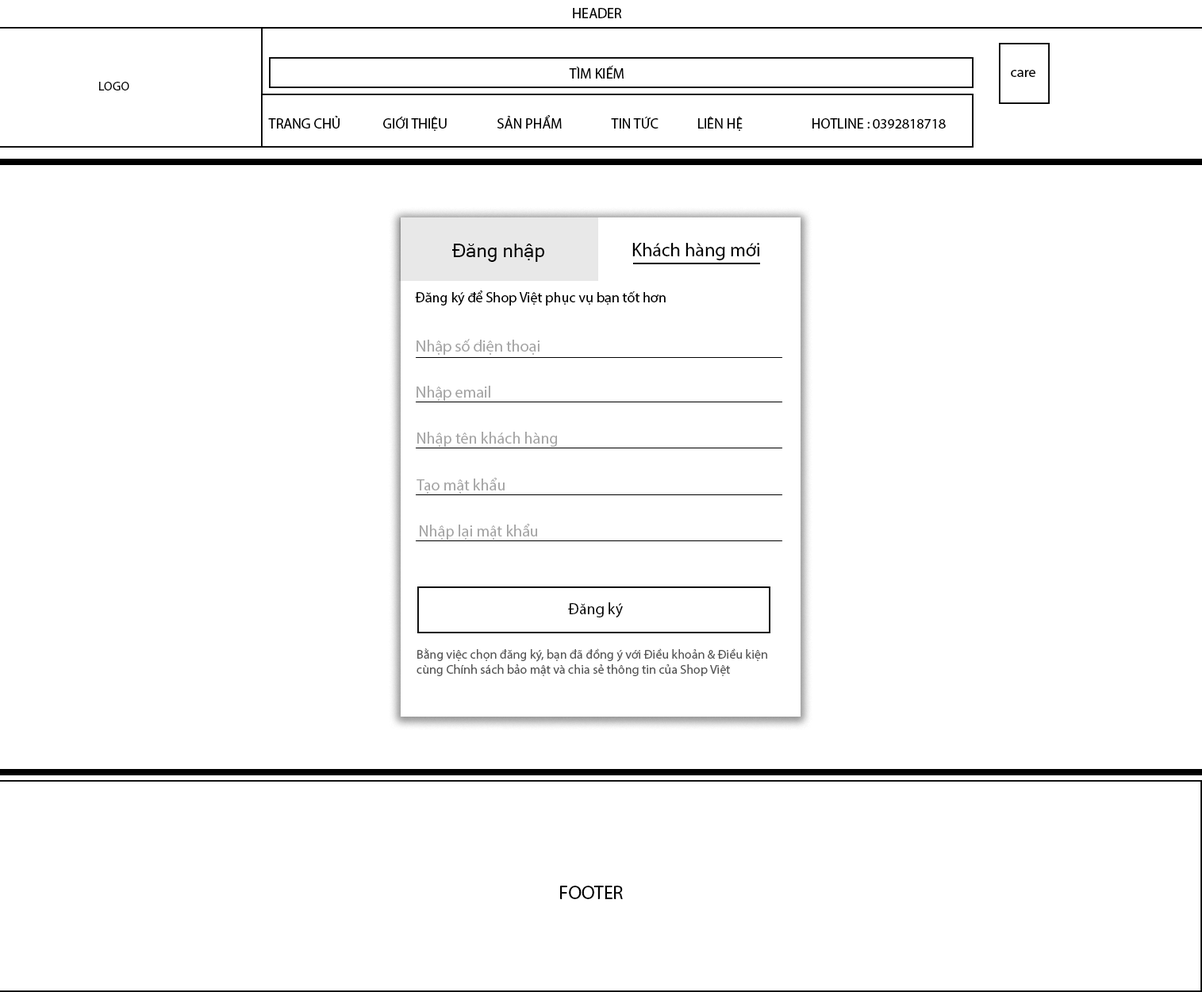
<style>
.page{position:relative;width:1202px;height:992px;background:#ffffff}
.page>*{position:absolute;margin:0}
.t1{font:14.3px "MyriadPro-Regular";color:#000000}
.t2{font:12.7px "MyriadPro-Regular";color:#000000}
.t3{font:19px "MicrosoftSansSerif";color:#000000}
.t4{font:19px "MyriadPro-Regular";color:#000000}
.t5{font:15.9px "MyriadPro-Regular";color:#a3a3a3}
.t6{font:15.9px "MyriadPro-Regular";color:#000000}
.t7{font:12.7px "MyriadPro-Regular";color:#555555}
.t8{font:19px "MyriadPro-Regular";color:#000000;text-transform:uppercase}
</style>
<div class="page">
<p class="t1" style="left:573px;top:8px;width:49px;height:10px">HEADER</p>
<p class="t1" style="left:569px;top:65px;width:55px;height:14px">TÌM KIẾM</p>
<p class="t1" style="left:1011px;top:70px;width:25px;height:7px">care</p>
<p class="t2" style="left:99px;top:82px;width:30px;height:8px">LOGO</p>
<p class="t1" style="left:268px;top:115px;width:678px;height:16px">TRANG CHỦ   GIỚI THIỆU  SẢN PHẨM   TIN TỨC  LIÊN HỆ   HOTLINE : 0392818718</p>
<p class="t3" style="left:452px;top:244px;width:92px;height:18px">Đăng nhập</p>
<p class="t4" style="left:632px;top:243px;width:127px;height:17px">Khách hàng mới</p>
<p class="t1" style="left:415px;top:290px;width:251px;height:16px">Đăng ký để Shop Việt phục vụ bạn tốt hơn</p>
<p class="t5" style="left:417px;top:339px;width:123px;height:16px">Nhập số điện thoại</p>
<p class="t5" style="left:417px;top:386px;width:73px;height:15px">Nhập email</p>
<p class="t5" style="left:417px;top:432px;width:140px;height:15px">Nhập tên khách hàng</p>
<p class="t5" style="left:417px;top:478px;width:88px;height:16px">Tạo mật khẩu</p>
<p class="t5" style="left:420px;top:524px;width:117px;height:16px">Nhập lại mật khẩu</p>
<p class="t6" style="left:568px;top:602px;width:55px;height:15px">Đăng ký</p>
<p class="t7" style="left:417px;top:648px;width:350px;height:28px">Bằng việc chọn đăng ký, bạn đã đồng ý với Điều khoản &amp; Điều kiện cùng Chính sách bảo mật và chia sẻ thông tin của Shop Việt</p>
<p class="t8" style="left:560px;top:886px;width:63px;height:13px">footer</p>
</div>
